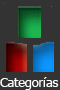
<style>
.page{position:relative;width:60px;height:90px;background:#333333}
.page>*{position:absolute;margin:0}
.t1{font:12.5px "Tahoma";color:#ffffff}
</style>
<div class="page">
<p class="t1" style="left:0px;top:77px;width:59px;height:13px">Categorías</p>
</div>
